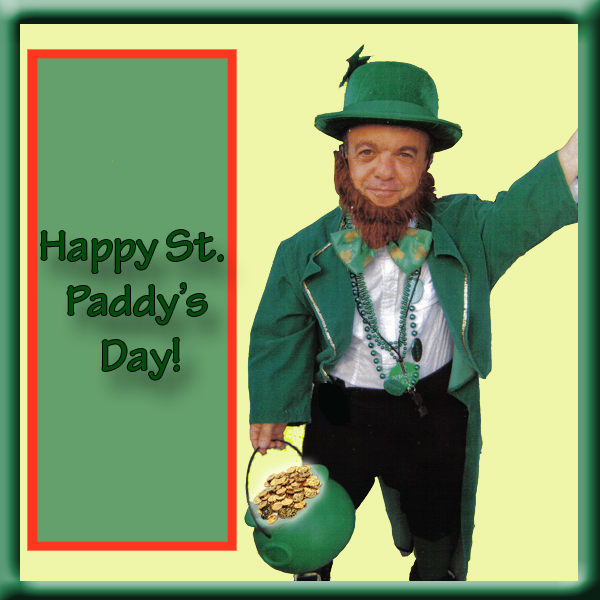
<style>
.page{position:relative;width:600px;height:600px;background:#eff6a9}
.page>*{position:absolute;margin:0}
.t1{font:45.8px "TektonPro-Bold";color:#024d0b}
</style>
<div class="page">
<p class="t1" style="left:41px;top:230px;width:182px;height:150px;text-align:center">Happy St. <br>Paddy’s<br> Day!</p>
</div>
